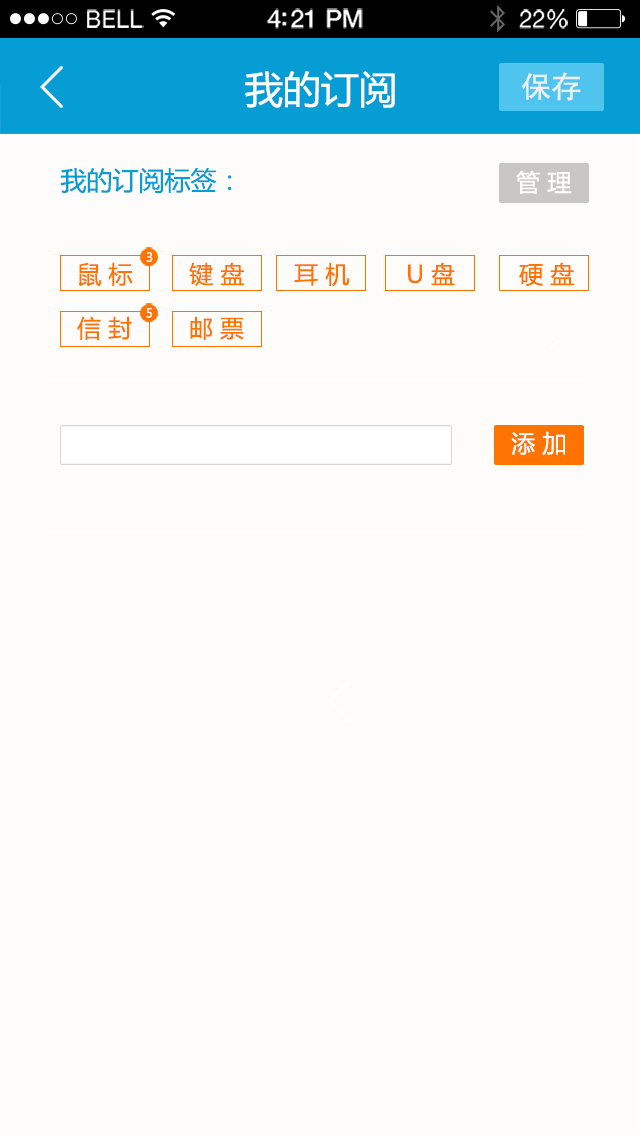
<style>
.page{position:relative;width:640px;height:1135px;background:#fefbfb}
.page>*{position:absolute;margin:0}
.t1{font:23.1px "HelveticaNeue";letter-spacing:0.02em;color:#ffffff}
.t2{font:25.1px "HelveticaNeue-Medium";letter-spacing:-0.02em;color:#ffffff}
.t3{font:24.1px "HelveticaNeue";letter-spacing:-0.02em;color:#ffffff}
.t4{font:38px "MicrosoftYaHei";color:#ffffff}
.t5{font:33.8px "MicrosoftYaHei";color:#ffffff}
.t6{font:30.1px "FZHTJW--GB1-0";color:#eeeeee}
.t7{font:26px "MicrosoftYaHei";color:#069dd4}
.t8{font:24px "MicrosoftYaHei";color:#ffffff}
.t9{font:12.4px "MicrosoftYaHei";color:#ffffff}
.t10{font:24px "MicrosoftYaHei";color:#ff7300}
</style>
<div class="page">
<p class="t1" style="left:87px;top:9px;width:57px;height:19px">BELL</p>
<p class="t2" style="left:267px;top:8px;width:96px;height:21px">4:21 PM</p>
<p class="t3" style="left:519px;top:9px;width:49px;height:20px">22%</p>
<p class="t4" style="left:245px;top:71px;width:150px;height:37px"><span class="t5">   </span>我的订阅</p>
<p class="t6" style="left:522px;top:72px;width:59px;height:29px">保存</p>
<p class="t7" style="left:60px;top:168px;width:172px;height:26px">我的订阅标签：</p>
<p class="t8" style="left:516px;top:170px;width:56px;height:24px">管 理</p>
<p class="t9" style="left:146px;top:252px;width:7px;height:10px">3</p>
<p class="t10" style="left:78px;top:262px;width:496px;height:25px">鼠 标        键 盘       耳 机        U 盘         硬 盘</p>
<p class="t10" style="left:77px;top:316px;width:167px;height:24px">信 封        邮 票</p>
<p class="t9" style="left:146px;top:308px;width:7px;height:10px">5</p>
<p class="t8" style="left:511px;top:431px;width:54px;height:25px">添 加</p>
</div>
